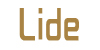
<style>
.page{position:relative;width:100px;height:50px;background:#ffffff}
.page>*{position:absolute;margin:0}
.t1{font:72px "TRENDS";letter-spacing:0.075em;color:#a98344;font-weight:bold;scale:0.67 1}
</style>
<div class="page">
<p class="t1" style="left:19px;top:8px;width:60px;height:33px">Lide</p>
</div>
